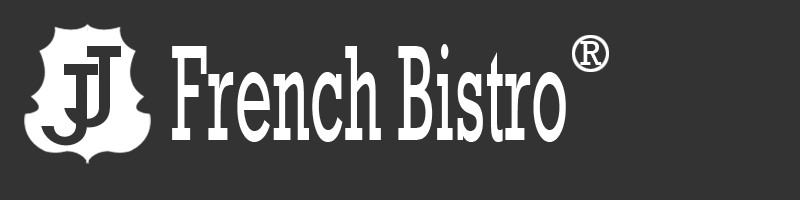
<style>
.page{position:relative;width:800px;height:200px;background:#333333}
.page>*{position:absolute;margin:0}
.t1{font:34.8px "Rockwell";color:#ffffff}
.t2{font:139.4px "Rockwell";color:#ffffff;scale:0.47 1}
</style>
<div class="page">
<p class="t1" style="left:580px;top:41px;width:22px;height:24px">R</p>
<p class="t2" style="left:172px;top:44px;width:394px;height:98px">French Bistro</p>
</div>
